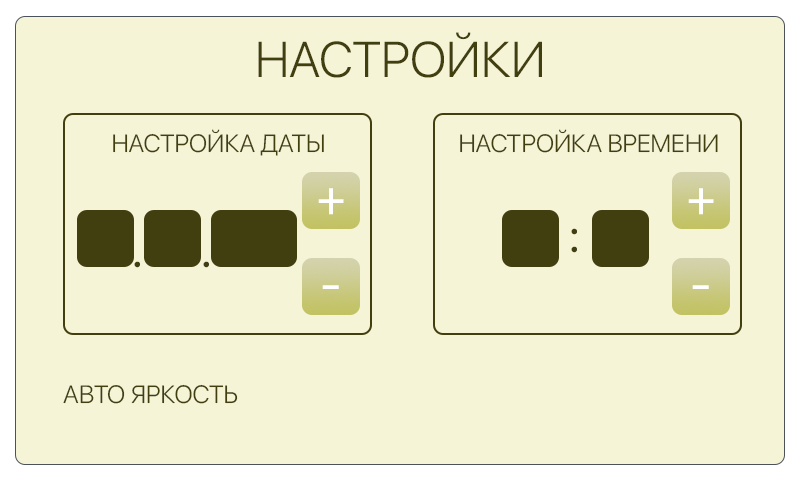
<style>
.page{position:relative;width:800px;height:480px;background:#f6f4d6}
.page>*{position:absolute;margin:0}
.t1{font:50px "SFUIDisplay-Light";color:#413f0f}
.t2{font:25px "SFUIDisplay-Light";color:#413f0f}
.t3{font:50px "SFUIDisplay-Regular";color:#ffffff}
.t4{font:50px "SFUIDisplay-Regular";color:#413f0f}
</style>
<div class="page">
<p class="t1" style="left:258px;top:32px;width:284px;height:46px">НАСТРОЙКИ</p>
<p class="t2" style="left:113px;top:129px;width:211px;height:27px">НАСТРОЙКА ДАТЫ</p>
<p class="t2" style="left:460px;top:129px;width:258px;height:24px">НАСТРОЙКА ВРЕМЕНИ</p>
<p class="t3" style="left:318px;top:188px;width:26px;height:27px">+</p>
<p class="t3" style="left:688px;top:188px;width:26px;height:27px">+</p>
<p class="t4" style="left:571px;top:228px;width:6px;height:25px">:</p>
<p class="t4" style="left:134px;top:261px;width:6px;height:7px">.</p>
<p class="t4" style="left:203px;top:261px;width:6px;height:7px">.</p>
<p class="t3" style="left:322px;top:285px;width:17px;height:4px">-</p>
<p class="t3" style="left:692px;top:285px;width:17px;height:4px">-</p>
<p class="t2" style="left:63px;top:384px;width:175px;height:20px">АВТО ЯРКОСТЬ</p>
</div>
